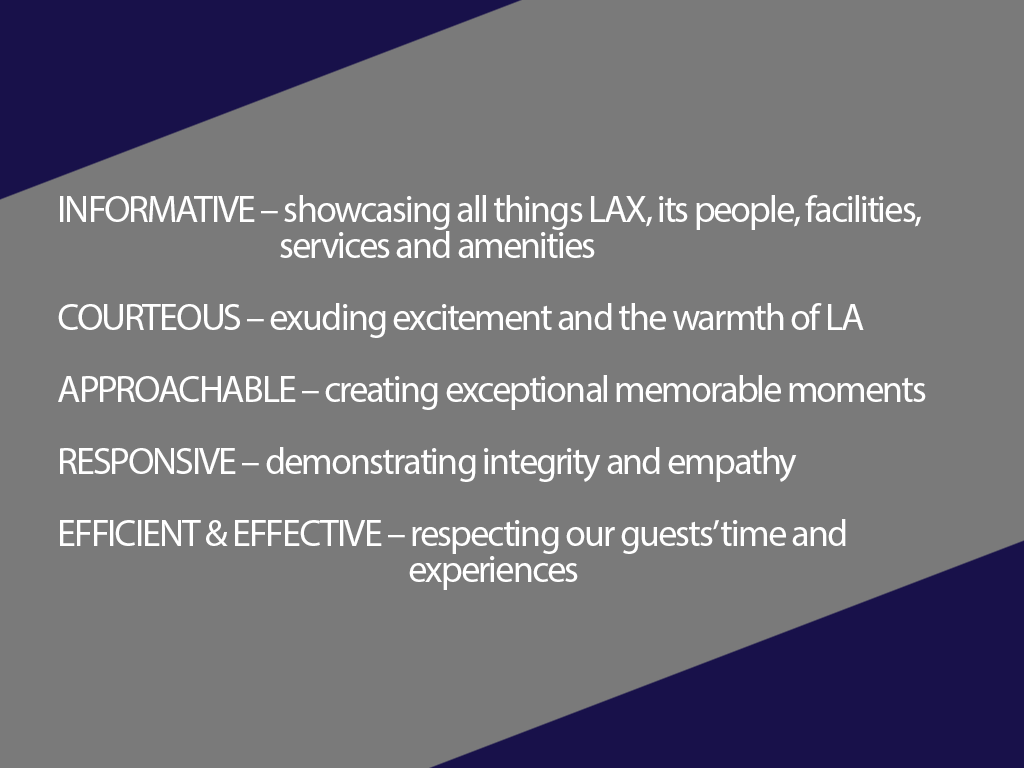
<style>
.page{position:relative;width:1024px;height:768px;background:#7a7a7a}
.page>*{position:absolute;margin:0}
.t1{font:38px/36px "MyriadPro-Regular";letter-spacing:-0.05em;color:#ffffff}
.t2{font:38px/36px "MyriadPro-Regular";letter-spacing:-0.05em;color:#ffffff;text-transform:uppercase}
</style>
<div class="page">
<p class="t1" style="left:58px;top:195px;width:868px;height:395px"><span class="t2">Informative </span>– showcasing all things LAX, its people, facilities, <br>                                    services and amenities<br><br><span class="t2">Courteous </span>– exuding excitement and the warmth of LA<br><br><span class="t2">Approachable </span>– creating exceptional memorable moments<br><br><span class="t2">Responsive </span>– demonstrating integrity and empathy<br><br><span class="t2">Efficient &amp; Effective</span> – respecting our guests’ time and <br>                                                         experiences</p>
</div>
